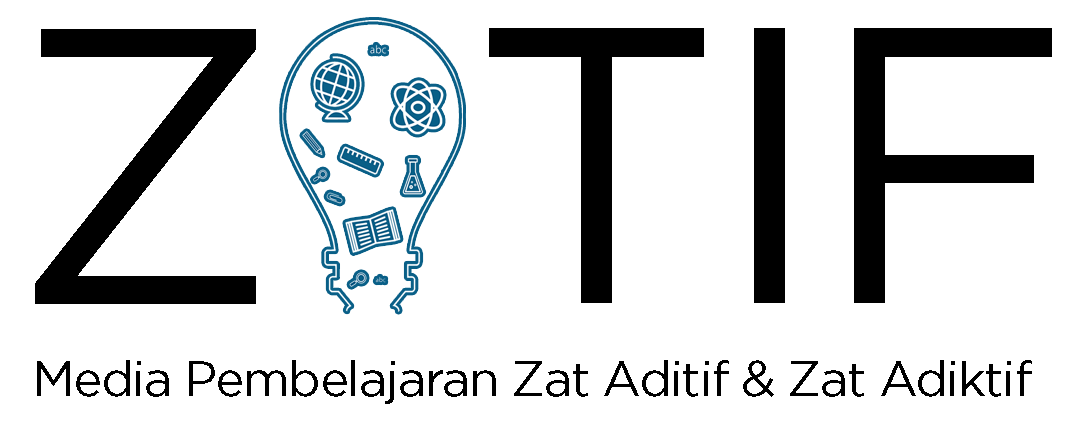
<style>
.page{position:relative;width:1080px;height:428px;background:#ffffff}
.page>*{position:absolute;margin:0}
.t1{font:392.9px "Gotham-Book";letter-spacing:-0.03em;color:#000000}
.t2{font:49.3px "Gotham-Book";letter-spacing:-0.03em;color:#000000}
</style>
<div class="page">
<p class="t1" style="left:35px;top:29px;width:221px;height:275px">Z</p>
<p class="t1" style="left:489px;top:28px;width:563px;height:275px">TIF</p>
<p class="t2" style="left:37px;top:360px;width:995px;height:44px">Media Pembelajaran Zat Aditif &amp; Zat Adiktif</p>
</div>
